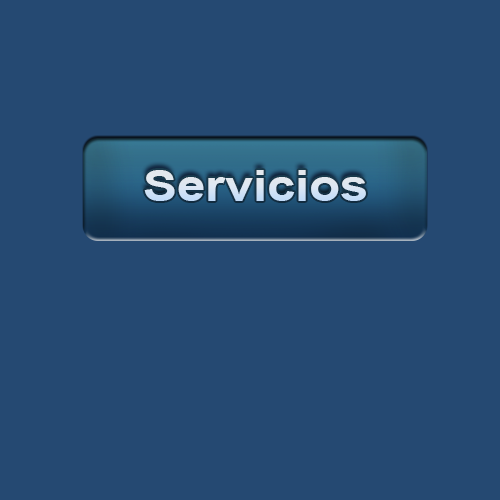
<style>
.page{position:relative;width:500px;height:500px;background:#254972}
.page>*{position:absolute;margin:0}
.t1{font:42.9px "Arial-BoldMT";color:#e8edf2;scale:1.18 1}
</style>
<div class="page">
<p class="t1" style="left:144px;top:170px;width:222px;height:31px">Servicios</p>
</div>
